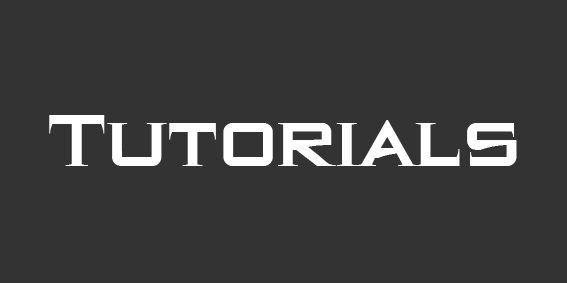
<style>
.page{position:relative;width:567px;height:283px;background:#333333}
.page>*{position:absolute;margin:0}
.t1{font:100px "BlackHoleBB";color:#ffffff}
</style>
<div class="page">
<p class="t1" style="left:49px;top:115px;width:468px;height:51px">Tutorials</p>
</div>
